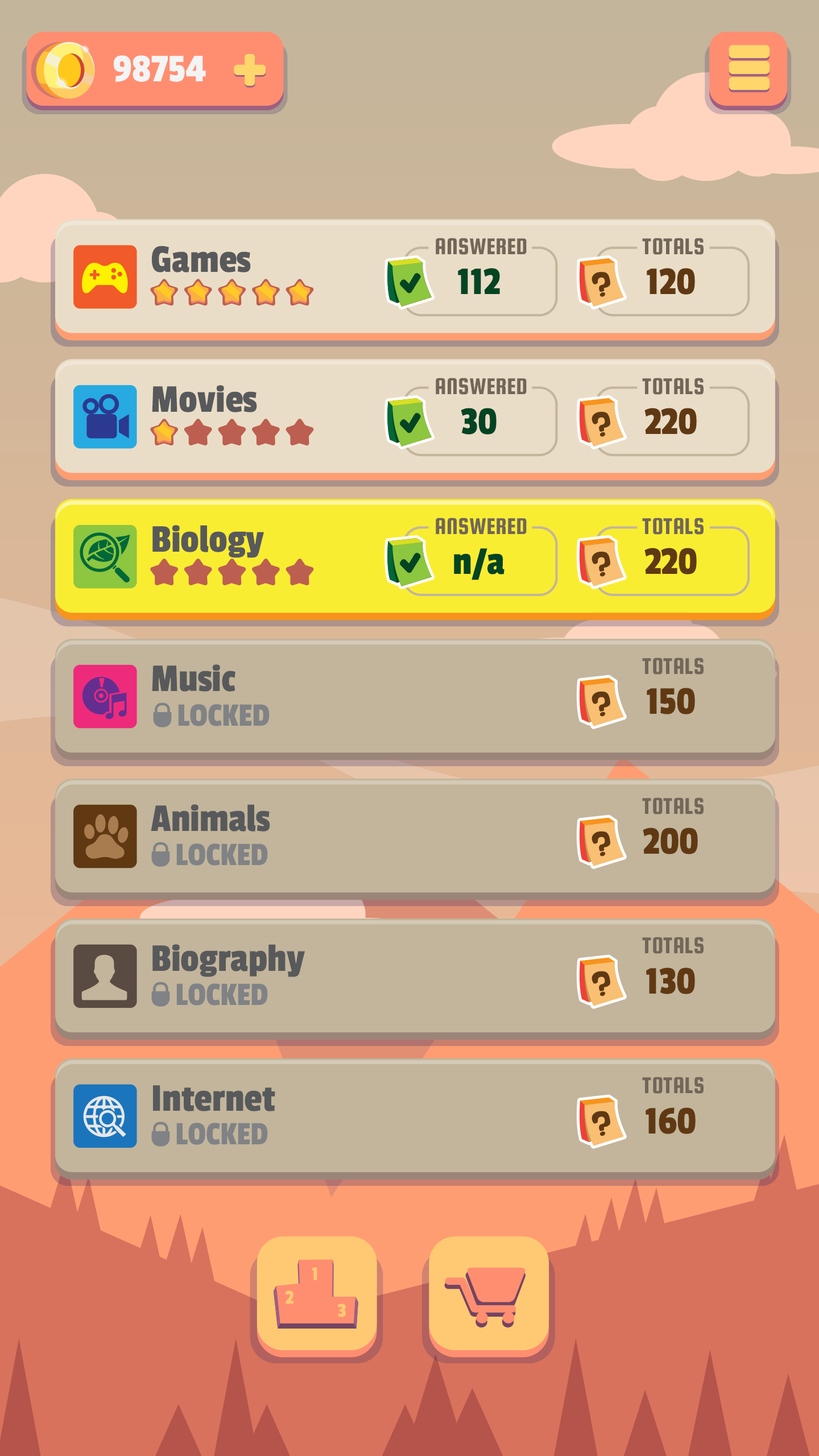
<style>
.page{position:relative;width:819px;height:1456px}
.page>*{position:absolute;margin:0}
.t1{font:40.9px "PassionOne-Regular";color:#f4f4f4}
.t2{font:40.9px "PassionOne-Regular";color:#58595b}
.t3{font:24.5px "SquadaOne-Regular";color:#726658}
.t4{font:40.9px "PassionOne-Regular";color:#034423}
.t5{font:40.9px "PassionOne-Regular";color:#603913}
.t6{font:34.1px "PassionOne-Regular";color:#808285}
</style>
<div class="page">
<p class="t1" style="left:113px;top:55px;width:93px;height:27px">98754</p>
<p class="t2" style="left:151px;top:246px;width:100px;height:26px">Games</p>
<p class="t3" style="left:436px;top:238px;width:91px;height:17px">ANSWERED</p>
<p class="t3" style="left:642px;top:238px;width:62px;height:17px">TOTALS</p>
<p class="t4" style="left:458px;top:268px;width:42px;height:26px">112</p>
<p class="t5" style="left:647px;top:268px;width:48px;height:27px">120</p>
<p class="t3" style="left:436px;top:378px;width:91px;height:17px">ANSWERED</p>
<p class="t3" style="left:642px;top:378px;width:62px;height:17px">TOTALS</p>
<p class="t2" style="left:152px;top:385px;width:105px;height:27px">Movies</p>
<p class="t4" style="left:461px;top:408px;width:36px;height:27px">30</p>
<p class="t5" style="left:644px;top:408px;width:53px;height:27px">220</p>
<p class="t3" style="left:436px;top:518px;width:91px;height:17px">ANSWERED</p>
<p class="t3" style="left:642px;top:518px;width:62px;height:17px">TOTALS</p>
<p class="t2" style="left:152px;top:525px;width:112px;height:33px">Biology</p>
<p class="t4" style="left:454px;top:548px;width:50px;height:32px">n/a</p>
<p class="t5" style="left:644px;top:548px;width:53px;height:26px">220</p>
<p class="t2" style="left:152px;top:664px;width:83px;height:28px">Music</p>
<p class="t3" style="left:642px;top:657px;width:62px;height:18px">TOTALS</p>
<p class="t5" style="left:647px;top:688px;width:48px;height:26px">150</p>
<p class="t6" style="left:178px;top:704px;width:92px;height:22px">LOCKED</p>
<p class="t3" style="left:642px;top:797px;width:62px;height:17px">TOTALS</p>
<p class="t2" style="left:151px;top:804px;width:119px;height:28px">Animals</p>
<p class="t5" style="left:643px;top:828px;width:55px;height:26px">200</p>
<p class="t6" style="left:176px;top:843px;width:92px;height:23px">LOCKED</p>
<p class="t3" style="left:642px;top:937px;width:62px;height:17px">TOTALS</p>
<p class="t2" style="left:152px;top:944px;width:153px;height:33px">Biography</p>
<p class="t5" style="left:646px;top:967px;width:49px;height:27px">130</p>
<p class="t6" style="left:176px;top:983px;width:92px;height:23px">LOCKED</p>
<p class="t2" style="left:153px;top:1085px;width:122px;height:26px">Internet</p>
<p class="t3" style="left:642px;top:1077px;width:62px;height:17px">TOTALS</p>
<p class="t5" style="left:646px;top:1107px;width:50px;height:27px">160</p>
<p class="t6" style="left:176px;top:1123px;width:92px;height:22px">LOCKED</p>
</div>
